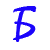
<style>
.page{position:relative;width:50px;height:50px;background:#ffffff}
.page>*{position:absolute;margin:0}
.t1{font:50px "Mistral";color:#1b04fb}
</style>
<div class="page">
<p class="t1" style="left:13px;top:6px;width:24px;height:36px">Б</p>
</div>
